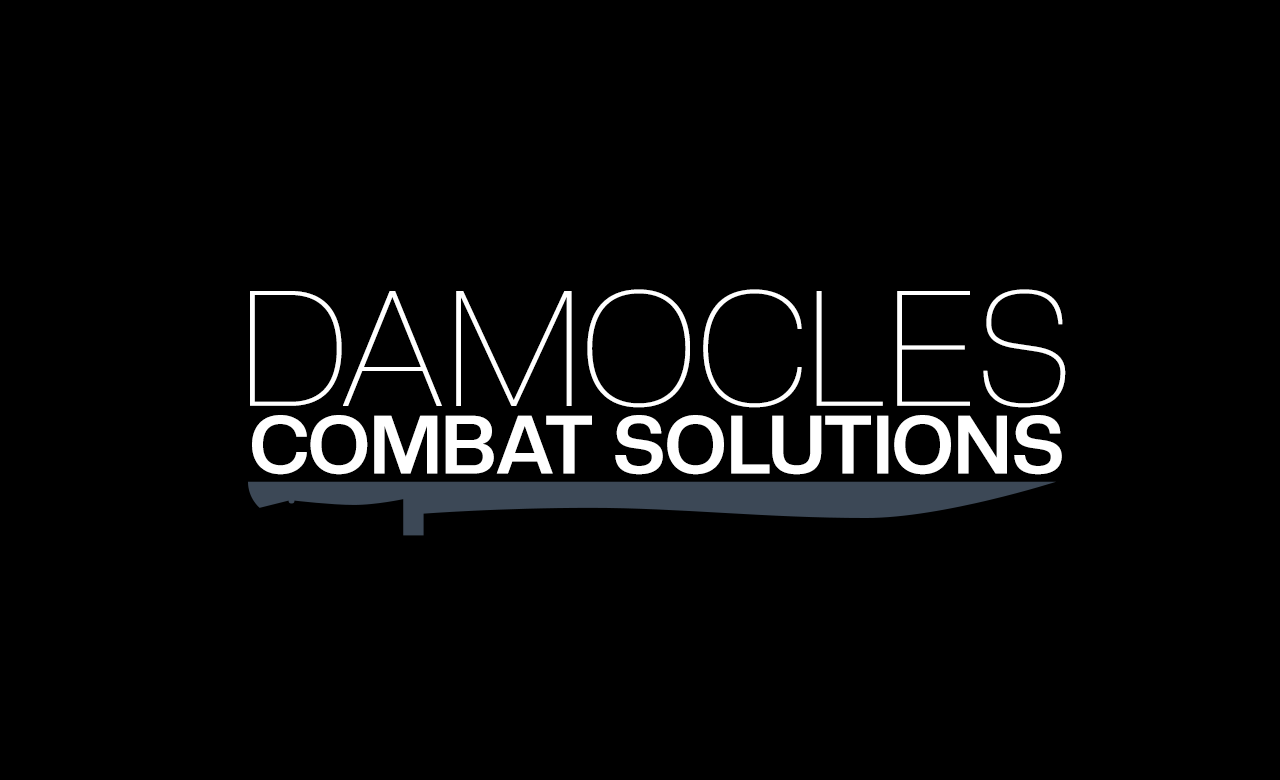
<style>
.page{position:relative;width:1280px;height:780px;background:#000000}
.page>*{position:absolute;margin:0}
.t1{font:161px "CreatoDisplay-Thin";color:#ffffff;text-transform:uppercase}
.t2{font:81.1px "CreatoDisplay-Bold";color:#ffffff;text-transform:uppercase}
</style>
<div class="page">
<p class="t1" style="left:250px;top:289px;width:816px;height:119px">Damocles</p>
<p class="t2" style="left:252px;top:415px;width:810px;height:60px">Combat Solutions</p>
</div>
